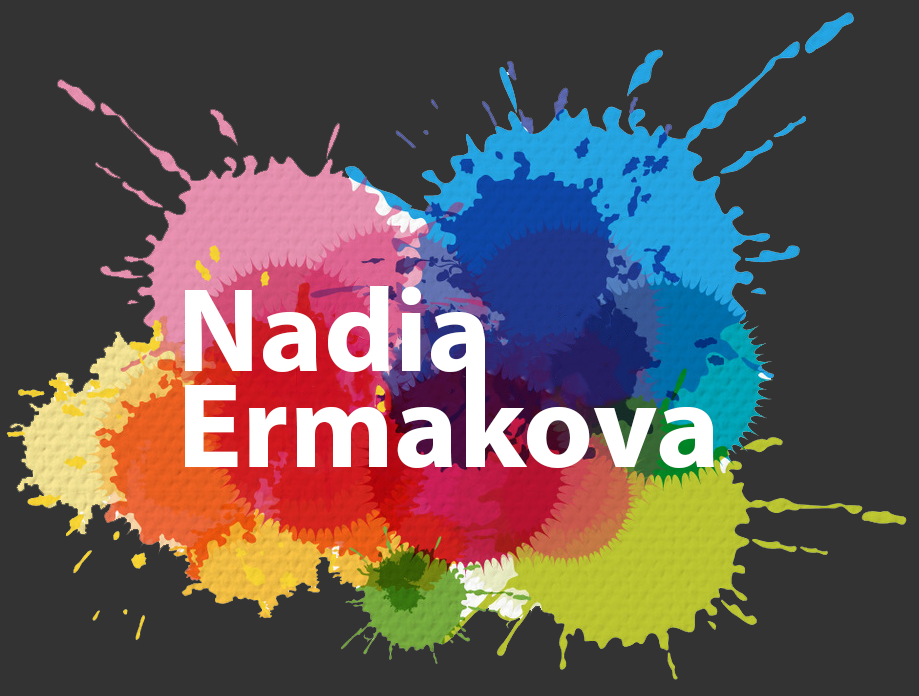
<style>
.page{position:relative;width:919px;height:696px;background:#333333}
.page>*{position:absolute;margin:0}
.t1{font:120px "MyriadPro-Bold";color:#ffffff}
.t2{font:122.2px "MyriadPro-Bold";color:#ffffff}
</style>
<div class="page">
<p class="t1" style="left:185px;top:286px;width:300px;height:86px">Nadia</p>
<p class="t2" style="left:185px;top:380px;width:529px;height:88px">Ermakova</p>
</div>
